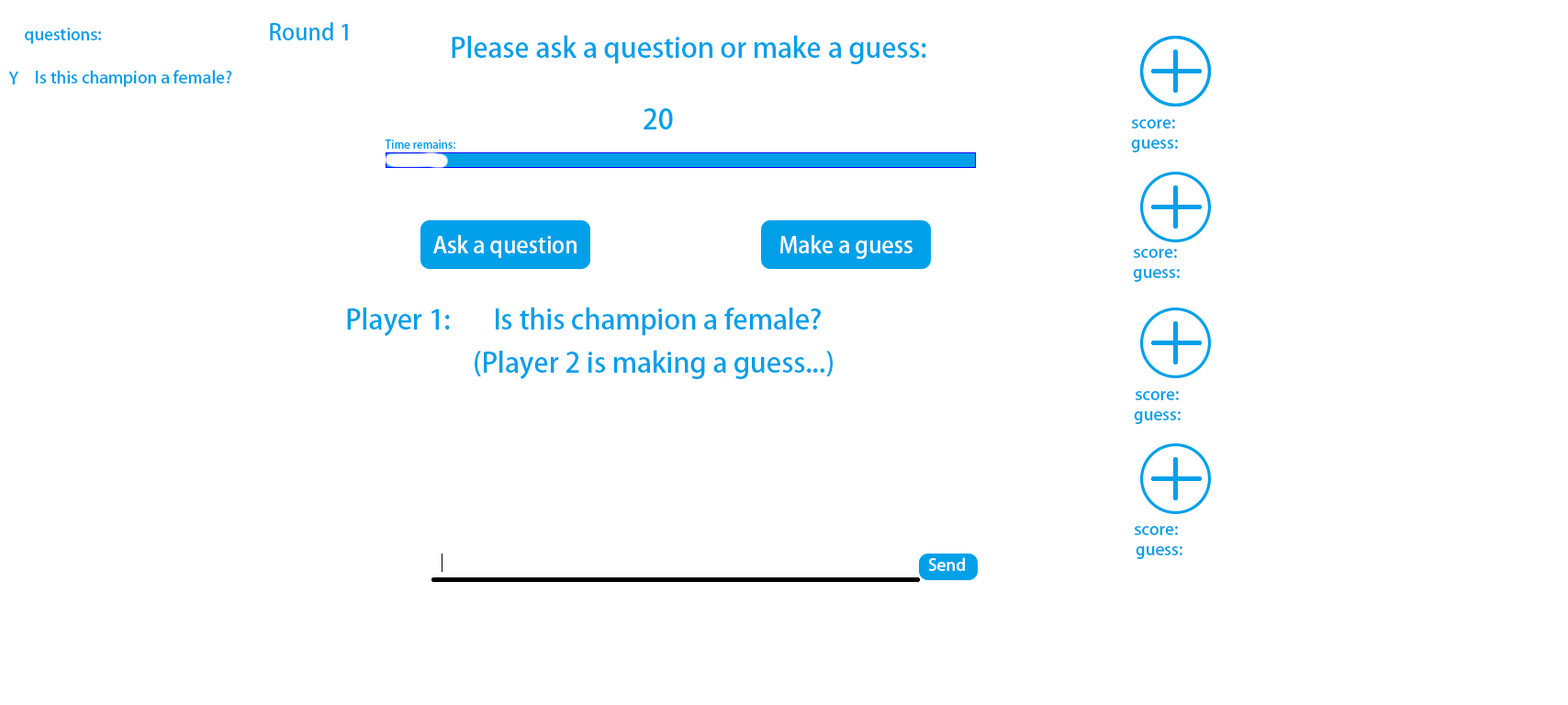
<style>
.page{position:relative;width:1568px;height:705px;background:#ffffff}
.page>*{position:absolute;margin:0}
.t1{font:16.5px "AdobeHeitiStd-Regular";color:#00a0e9}
.t2{font:22px "AdobeHeitiStd-Regular";color:#00a0e9}
.t3{font:27.5px "AdobeHeitiStd-Regular";color:#00a0e9}
.t4{font:11px "AdobeHeitiStd-Regular";color:#00a0e9}
.t5{font:22px "AdobeHeitiStd-Regular";color:#ffffff}
.t6{font:16.5px "AdobeHeitiStd-Regular";color:#ffffff}
</style>
<div class="page">
<p class="t1" style="left:25px;top:28px;width:76px;height:16px">questions:</p>
<p class="t2" style="left:270px;top:22px;width:78px;height:18px">Round 1</p>
<p class="t3" style="left:452px;top:35px;width:474px;height:29px">Please ask a question or make a guess:</p>
<p class="t1" style="left:8px;top:72px;width:11px;height:12px">Y</p>
<p class="t1" style="left:36px;top:70px;width:196px;height:17px">Is this champion a female?</p>
<p class="t1" style="left:1131px;top:119px;width:44px;height:10px">score:</p>
<p class="t4" style="left:385px;top:140px;width:70px;height:9px">Time remains:</p>
<p class="t1" style="left:1131px;top:140px;width:47px;height:12px">guess:</p>
<p class="t5" style="left:433px;top:235px;width:144px;height:23px">Ask a question</p>
<p class="t5" style="left:780px;top:235px;width:133px;height:24px">Make a guess</p>
<p class="t1" style="left:1133px;top:249px;width:44px;height:9px">score:</p>
<p class="t1" style="left:1133px;top:269px;width:47px;height:13px">guess:</p>
<p class="t3" style="left:347px;top:308px;width:103px;height:28px">Player 1:</p>
<p class="t3" style="left:496px;top:307px;width:325px;height:29px">Is this champion a female?</p>
<p class="t3" style="left:475px;top:350px;width:358px;height:29px">(Player 2 is making a guess...)</p>
<p class="t1" style="left:1135px;top:391px;width:44px;height:9px">score:</p>
<p class="t1" style="left:1134px;top:411px;width:47px;height:13px">guess:</p>
<p class="t1" style="left:1134px;top:526px;width:44px;height:9px">score:</p>
<p class="t6" style="left:928px;top:557px;width:37px;height:14px">Send</p>
<p class="t1" style="left:1136px;top:546px;width:46px;height:13px">guess:</p>
</div>
